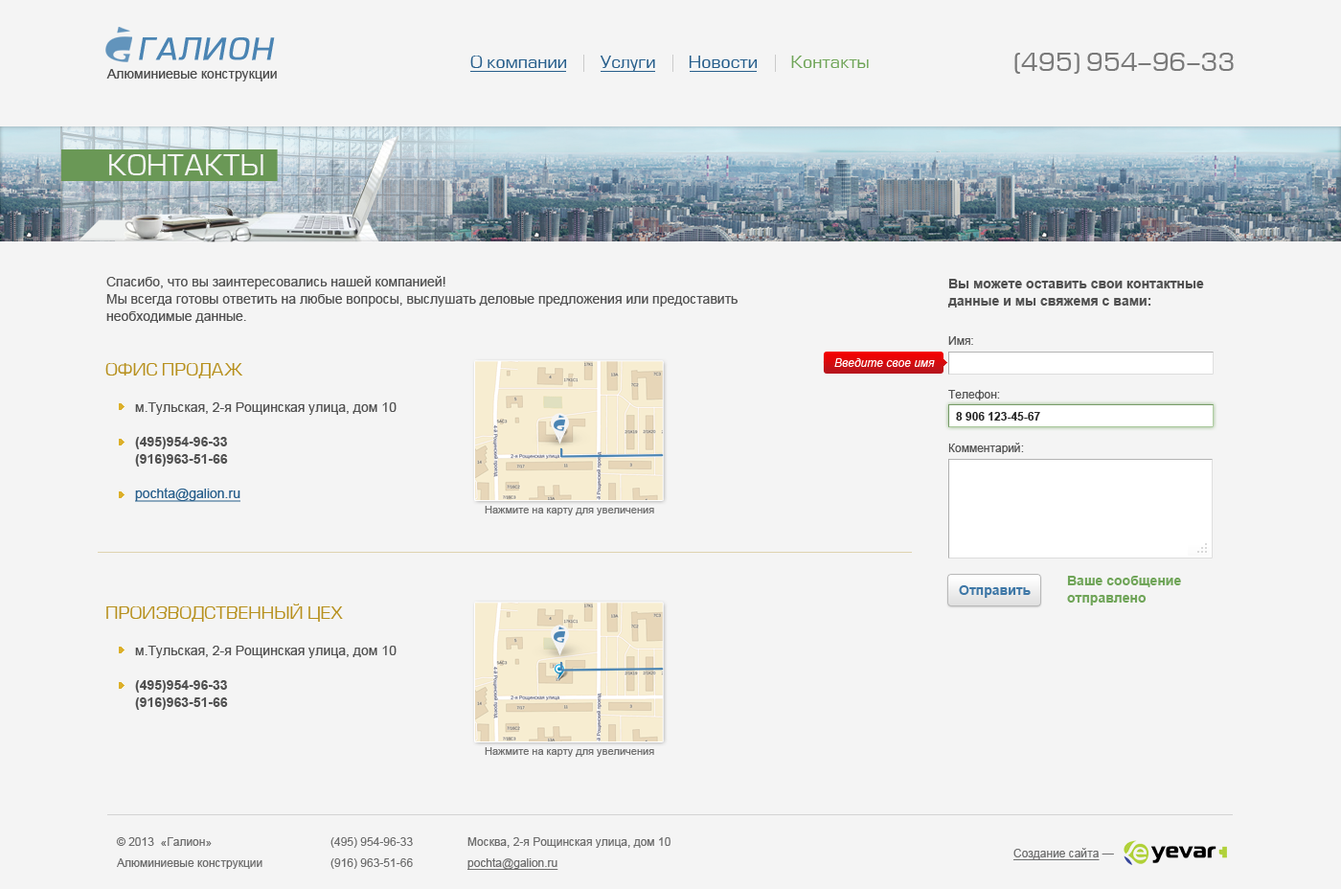
<style>
.page{position:relative;width:1341px;height:889px;background:#f4f4f4}
.page>*{position:absolute;margin:0}
.t1{font:28.7px "Europe-Italic";letter-spacing:0.06em;color:#4a84b3;font-weight:bold}
.t2{font:24.9px "EuropeNormal";color:#797979}
.t3{font:17.2px "EuropeNormal";color:#275e8b}
.t4{font:17.2px "EuropeNormal";color:#70a559}
.t5{font:13.4px "ArialMT";color:#4b4b4b}
.t6{font:27.8px "EuropeNormal";color:#f4f4f4;text-transform:uppercase}
.t7{font:13.4px/17.2px "ArialMT";color:#515151}
.t8{font:13.4px/17.2px "Arial-BoldMT";color:#515151}
.t9{font:11.5px/53.6px "ArialMT";color:#545454}
.t10{font:17.2px "EuropeNormal";color:#b7901d;text-transform:uppercase}
.t11{font:11.5px "Arial-ItalicMT";color:#ffffff}
.t12{font:13.4px/17.2px "ArialMT";color:#275e8b;text-decoration:underline}
.t13{font:11.5px "Arial-BoldMT";color:#292929}
.t14{font:10.5px "ArialMT";color:#6f6f6f}
.t15{font:13.4px/17.2px "Arial-BoldMT";color:#70a559}
.t16{font:13.4px "Arial-BoldMT";color:#3f78a7}
.t17{font:11.5px/21.1px "ArialMT";color:#6d6d6d}
.t18{font:11.5px/21.1px "ArialMT";color:#6d6d6d;text-decoration:underline}
.t19{font:11.5px "ArialMT";color:#6d6d6d;text-decoration:underline}
.t20{font:11.5px "ArialMT";color:#6d6d6d}
</style>
<div class="page">
<p class="t1" style="left:139px;top:37px;width:136px;height:23px">ГАЛИОН</p>
<p class="t2" style="left:1015px;top:53px;width:219px;height:21px">(495) 954-96-33</p>
<p class="t3" style="left:470px;top:56px;width:399px;height:16px">О компании        Услуги        Новости        <span class="t4">Контакты</span></p>
<p class="t5" style="left:106px;top:69px;width:171px;height:12px">Алюминиевые конструкции</p>
<p class="t6" style="left:109px;top:154px;width:154px;height:21px">КОНТАКТЫ</p>
<p class="t7" style="left:106px;top:276px;width:632px;height:47px">Спасибо, что вы заинтересовались нашей компанией! <br>Мы всегда готовы ответить на любые вопросы, выслушать деловые предложения или предоставить необходимые данные.</p>
<p class="t8" style="left:947px;top:279px;width:257px;height:29px">Вы можете оставить свои контактные данные и мы свяжемя с вами:</p>
<p class="t9" style="left:948px;top:336px;width:76px;height:118px">Имя:<br>Телефон:<br>Комментарий:</p>
<p class="t10" style="left:105px;top:363px;width:138px;height:15px">Офис продаж</p>
<p class="t11" style="left:834px;top:358px;width:101px;height:9px">Введите свое имя</p>
<p class="t7" style="left:135px;top:402px;width:262px;height:100px">м.Тульская, 2-я Рощинская улица, дом 10<br><br><span class="t8">(495)954-96-33<br>(916)963-51-66<br><br></span><span class="t12">pochta@galion.ru</span></p>
<p class="t13" style="left:956px;top:412px;width:84px;height:9px">8 906 123-45-67</p>
<p class="t14" style="left:485px;top:506px;width:169px;height:9px">Нажмите на карту для увеличения</p>
<p class="t15" style="left:1067px;top:576px;width:114px;height:29px">Ваше сообщение<br>отправлено</p>
<p class="t16" style="left:959px;top:585px;width:72px;height:13px">Отправить</p>
<p class="t10" style="left:106px;top:604px;width:237px;height:18px">Производственный цех</p>
<p class="t7" style="left:135px;top:646px;width:262px;height:64px">м.Тульская, 2-я Рощинская улица, дом 10<br><br><span class="t8">(495)954-96-33<br>(916)963-51-66</span></p>
<p class="t14" style="left:485px;top:747px;width:169px;height:10px">Нажмите на карту для увеличения</p>
<p class="t17" style="left:116px;top:837px;width:147px;height:32px">© 2013  «Галион»<br>Алюминиевые конструкции</p>
<p class="t17" style="left:331px;top:837px;width:82px;height:32px">(495) 954-96-33<br>(916) 963-51-66</p>
<p class="t17" style="left:468px;top:837px;width:203px;height:33px">Москва, 2-я Рощинская улица, дом 10<br><span class="t18">pochta@galion.ru</span></p>
<p class="t19" style="left:1014px;top:848px;width:100px;height:12px">Создание сайта<span class="t20"> —</span></p>
</div>
